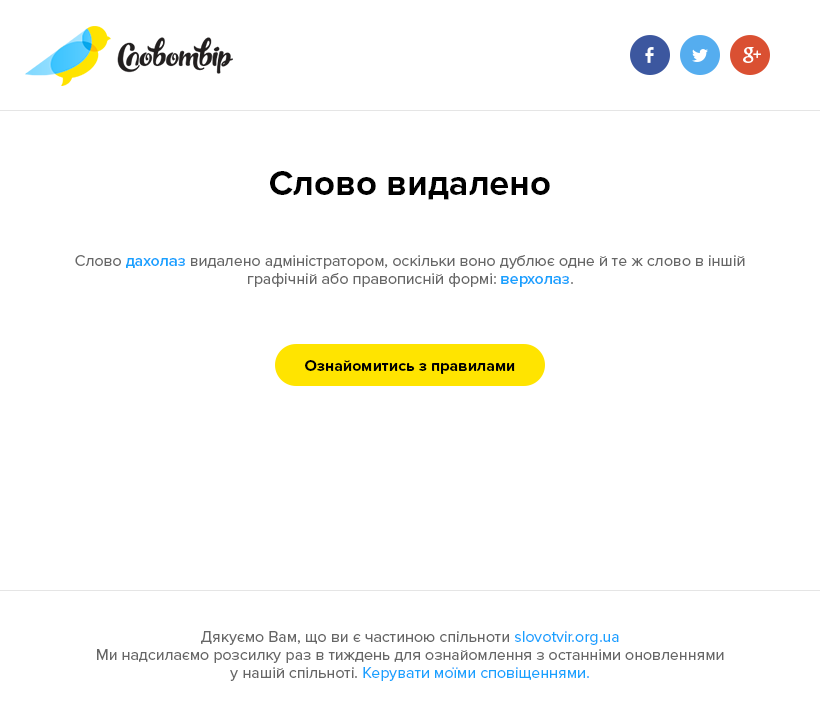
<style>
.page{position:relative;width:820px;height:708px;background:#ffffff}
.page>*{position:absolute;margin:0}
.t1{font:36px "ProximaNova-Bold";color:#000000}
.t2{font:16px/18px "ProximaNova-Regular";color:#666666}
.t3{font:16px/18px "ProximaNova-Semibold";color:#17a2ff}
.t4{font:16px "ProximaNova-Bold";color:#000000}
.t5{font:16px/18px "ProximaNova-Regular";color:#17a2ff}
</style>
<div class="page">
<p class="t1" style="left:270px;top:171px;width:280px;height:29px">Слово видалено</p>
<p class="t2" style="left:75px;top:255px;width:670px;height:32px;text-align:center">Слово <span class="t3">дахолаз</span> видалено адміністратором, оскільки воно дублює одне й те ж слово в іншій графічній або правописній формі: <span class="t3">верхолаз</span>.</p>
<p class="t4" style="left:305px;top:360px;width:210px;height:14px">Ознайомитись з правилами</p>
<p class="t2" style="left:97px;top:631px;width:627px;height:50px;text-align:center">Дякуємо Вам, що ви є частиною спільноти <span class="t5">slovotvir.org.ua</span><br>Ми надсилаємо розсилку раз в тиждень для ознайомлення з останніми оновленнями<br>у нашій спільноті. <span class="t5">Керувати моїми сповіщеннями.</span></p>
</div>
